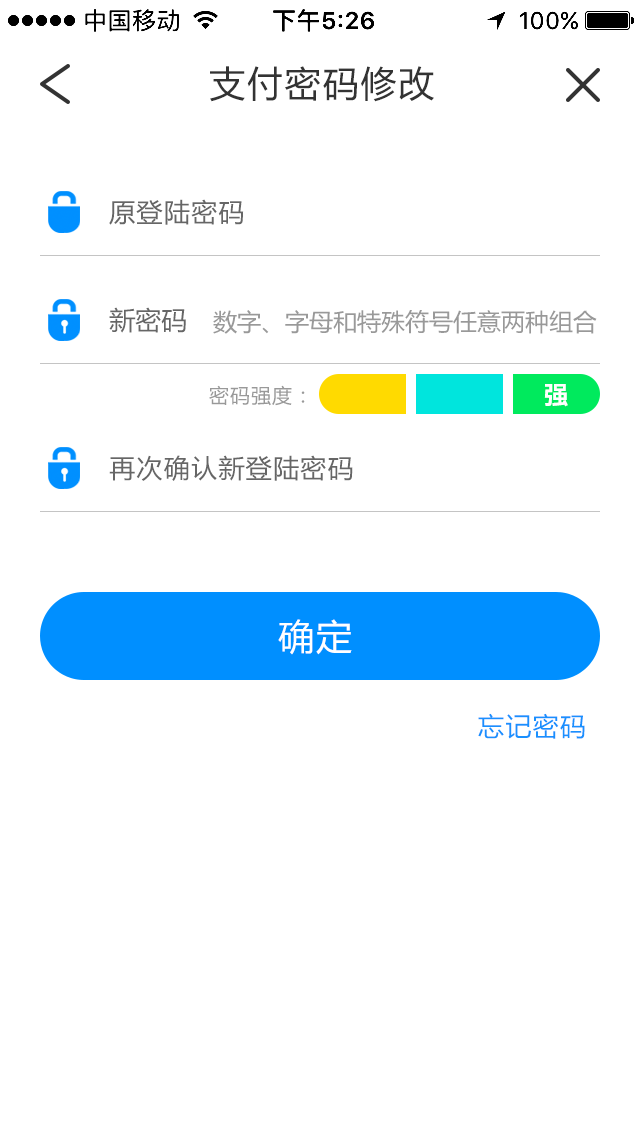
<style>
.page{position:relative;width:640px;height:1136px;background:#ffffff}
.page>*{position:absolute;margin:0}
.t1{font:36px "MicrosoftYaHei";letter-spacing:0.05em;color:#333333}
.t2{font:26px "MicrosoftYaHei";letter-spacing:0.05em;color:#666666}
.t3{font:26px "MicrosoftYaHei";color:#666666}
.t4{font:24px "MicrosoftYaHei";color:#999999}
.t5{font:20px "MicrosoftYaHei";letter-spacing:0.05em;color:#999999}
.t6{font:24px "MicrosoftYaHei-Bold";letter-spacing:0.05em;color:#ffffff}
.t7{font:36px "MicrosoftYaHei";letter-spacing:0.05em;color:#ffffff}
.t8{font:26px "MicrosoftYaHei";letter-spacing:0.05em;color:#1990fe}
</style>
<div class="page">
<p class="t1" style="left:210px;top:66px;width:224px;height:36px">支付密码修改</p>
<p class="t2" style="left:109px;top:199px;width:135px;height:26px">原登陆密码</p>
<p class="t3" style="left:109px;top:307px;width:77px;height:26px">新密码</p>
<p class="t4" style="left:213px;top:310px;width:384px;height:24px">数字、字母和特殊符号任意两种组合</p>
<p class="t5" style="left:209px;top:385px;width:96px;height:21px">密码强度：</p>
<p class="t6" style="left:544px;top:384px;width:24px;height:23px">强</p>
<p class="t2" style="left:109px;top:455px;width:244px;height:26px">再次确认新登陆密码</p>
<p class="t7" style="left:278px;top:619px;width:74px;height:36px">确定</p>
<p class="t8" style="left:478px;top:713px;width:107px;height:26px">忘记密码</p>
</div>
